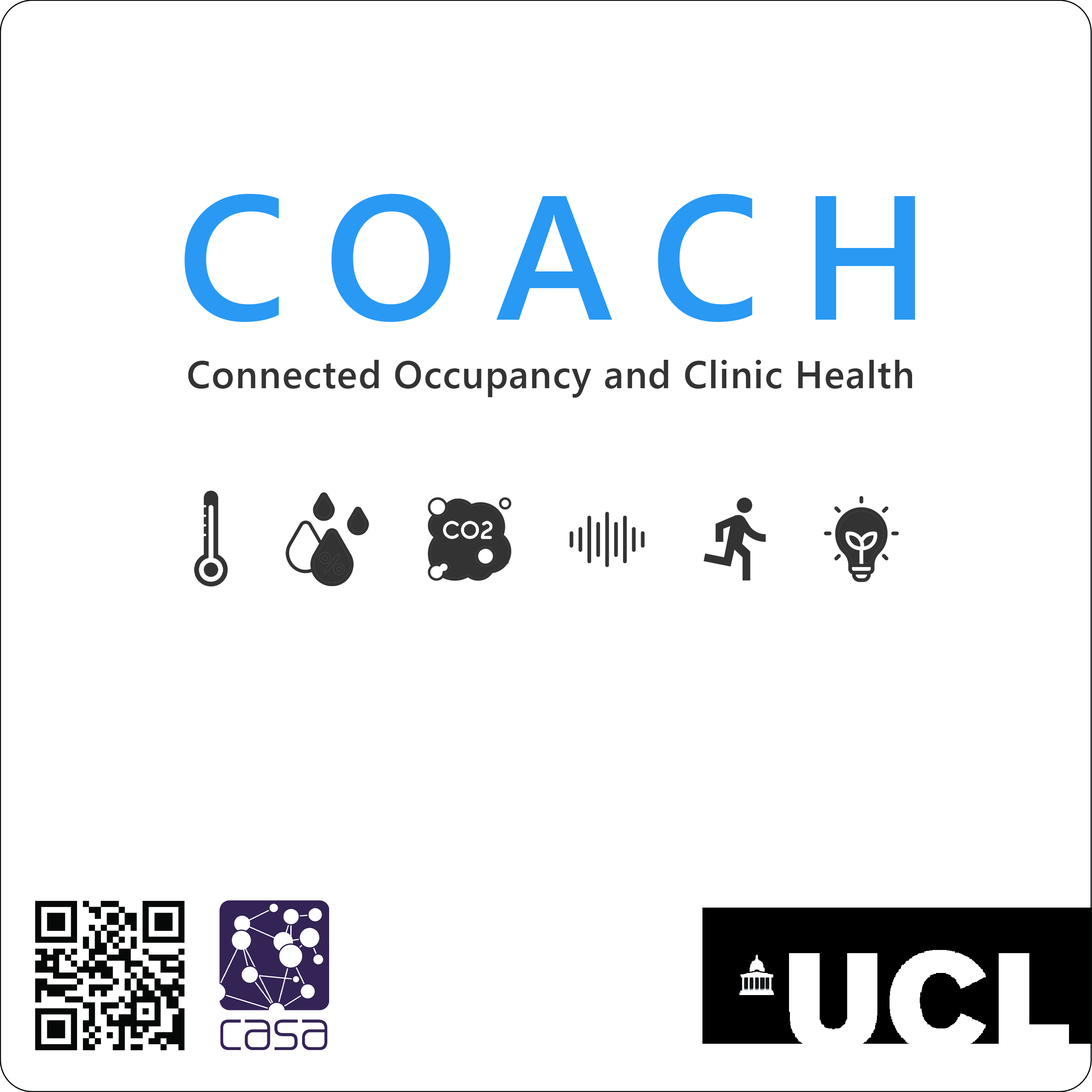
<style>
.page{position:relative;width:1092px;height:1092px;background:#ffffff}
.page>*{position:absolute;margin:0}
.t1{font:176.6px "SegoeUI-Semibold";letter-spacing:0.225em;color:#2999f4}
.t2{font:38.3px "SegoeUI-Semibold";letter-spacing:0.025em;color:#333333}
</style>
<div class="page">
<p class="t1" style="left:184px;top:194px;width:731px;height:128px">COACH</p>
<p class="t2" style="left:188px;top:360px;width:724px;height:38px">Connected Occupancy and Clinic Health</p>
</div>
